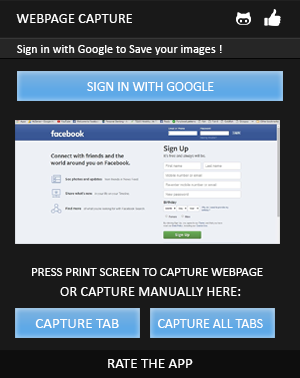
<style>
.page{position:relative;width:300px;height:378px;background:#191919}
.page>*{position:absolute;margin:0}
.t1{font:14.4px "Calibri";color:#ffffff}
.t2{font:12.3px "Calibri";color:#ffffff}
.t3{font:13.6px "Calibri";color:#ffffff}
.t4{font:12.8px "Calibri";color:#ffffff}
.t5{font:15.2px "Calibri";color:#ffffff}
.t6{font:13.8px "Calibri";color:#ffffff}
.t7{font:15.1px "Calibri";color:#ffffff}
</style>
<div class="page">
<p class="t1" style="left:16px;top:14px;width:116px;height:9px">WEBPAGE CAPTURE</p>
<p class="t2" style="left:17px;top:45px;width:205px;height:10px">Sign in with Google to Save your images !</p>
<p class="t3" style="left:87px;top:82px;width:127px;height:9px">SIGN IN WITH GOOGLE</p>
<p class="t4" style="left:32px;top:268px;width:231px;height:8px">PRESS PRINT SCREEN TO CAPTURE WEBPAGE</p>
<p class="t1" style="left:60px;top:287px;width:181px;height:9px">OR CAPTURE MANUALLY HERE:</p>
<p class="t5" style="left:35px;top:319px;width:84px;height:9px">CAPTURE TAB</p>
<p class="t6" style="left:158px;top:319px;width:105px;height:9px">CAPTURE ALL TABS</p>
<p class="t7" style="left:108px;top:359px;width:85px;height:9px">RATE THE APP</p>
</div>
